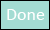
<style>
.page{position:relative;width:50px;height:30px;background:#a3dcd3}
.page>*{position:absolute;margin:0}
.t1{font:18px "Calibri";color:#ffffff}
</style>
<div class="page">
<p class="t1" style="left:7px;top:9px;width:38px;height:11px">Done</p>
</div>
